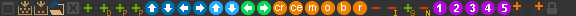
<style>
.page{position:relative;width:576px;height:16px;background:#333333}
.page>*{position:absolute;margin:0}
.t1{font:11px "ArialMT";color:#ffffff}
.t2{font:11px "Arial-BoldMT";color:#ffffff}
.t3{font:12px "Calibri-Bold";color:#ffffff}
.t4{font:8px "ArialMT";color:#ae6f00}
.t5{font:8px "Arial-BoldMT";color:#ae6f00}
.t6{font:8px "TimesNewRomanPSMT";color:#e79f04}
.t7{font:8px "ArialMT";color:#e79f04}
</style>
<div class="page">
<p class="t1" style="left:275px;top:5px;width:9px;height:6px">cr</p>
<p class="t1" style="left:291px;top:5px;width:11px;height:6px">ce</p>
<p class="t1" style="left:309px;top:5px;width:7px;height:6px">m</p>
<p class="t1" style="left:325px;top:5px;width:5px;height:6px">o</p>
<p class="t1" style="left:341px;top:3px;width:5px;height:8px">b</p>
<p class="t1" style="left:359px;top:5px;width:3px;height:6px">r</p>
<p class="t2" style="left:437px;top:4px;width:4px;height:8px">1</p>
<p class="t2" style="left:454px;top:4px;width:5px;height:8px">2</p>
<p class="t2" style="left:470px;top:4px;width:5px;height:8px">3</p>
<p class="t2" style="left:485px;top:4px;width:6px;height:8px">4</p>
<p class="t3" style="left:502px;top:4px;width:5px;height:8px">5</p>
<p class="t4" style="left:107px;top:10px;width:4px;height:6px">D</p>
<p class="t5" style="left:123px;top:10px;width:4px;height:6px">P</p>
<p class="t5" style="left:139px;top:10px;width:4px;height:6px">P</p>
<p class="t6" style="left:394px;top:10px;width:3px;height:6px">I</p>
<p class="t4" style="left:410px;top:10px;width:5px;height:6px">S</p>
<p class="t7" style="left:426px;top:10px;width:4px;height:6px">N</p>
</div>
